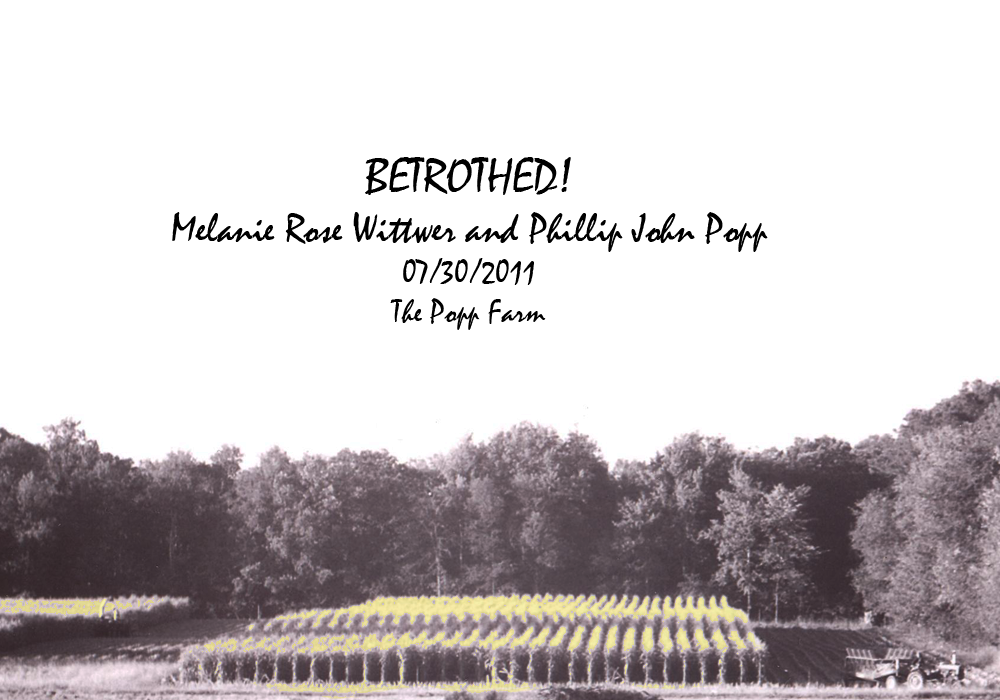
<style>
.page{position:relative;width:1000px;height:700px;background:#ffffff}
.page>*{position:absolute;margin:0}
.t1{font:41.7px "Mistral";color:#000000}
.t2{font:50px "Mistral";color:#000000}
.t3{font:33.3px "Mistral";color:#000000}
</style>
<div class="page">
<p class="t1" style="left:172px;top:157px;width:596px;height:173px;text-align:center"><span class="t2">BETROTHED!<br></span>Melanie Rose Wittwer and Phillip John Popp<br><span class="t3">07/30/2011<br>The Popp Farm</span></p>
</div>
